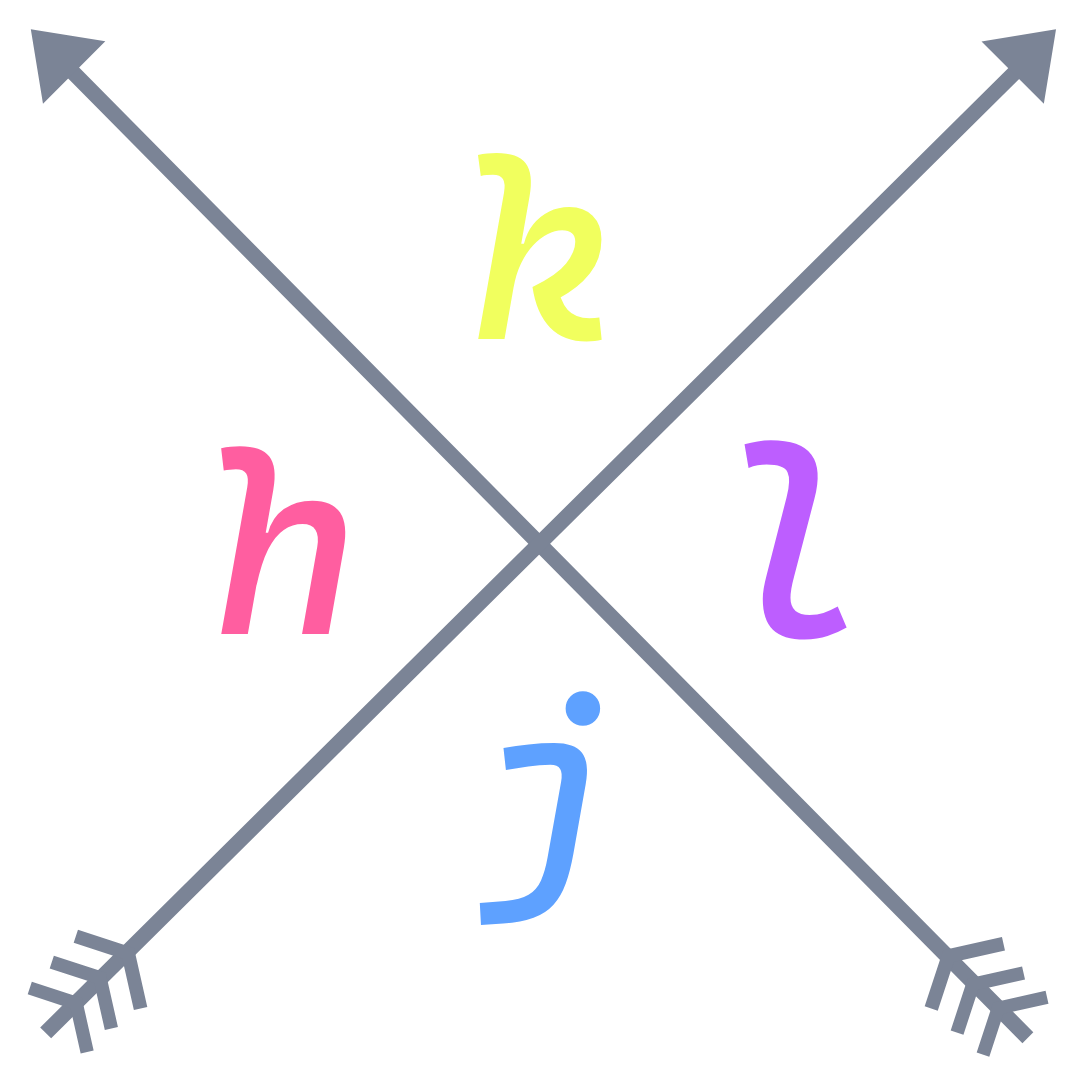
<style>
.page{position:relative;width:1080px;height:1080px;background:#ffffff}
.page>*{position:absolute;margin:0}
.t1{font:250.3px "CascadiaMonoNF-Italic";color:#f1ff5e}
.t2{font:252.9px "CascadiaMonoNF-Italic";color:#ff5ea0}
.t3{font:265px "CascadiaMonoNF-Italic";color:#bd5eff}
.t4{font:238.8px "CascadiaMonoNF-Italic";color:#5ea1ff}
</style>
<div class="page">
<p class="t1" style="left:478px;top:153px;width:124px;height:189px">k</p>
<p class="t2" style="left:221px;top:446px;width:125px;height:188px">h</p>
<p class="t3" style="left:744px;top:440px;width:103px;height:200px">l</p>
<p class="t4" style="left:479px;top:691px;width:122px;height:234px">j</p>
</div>
